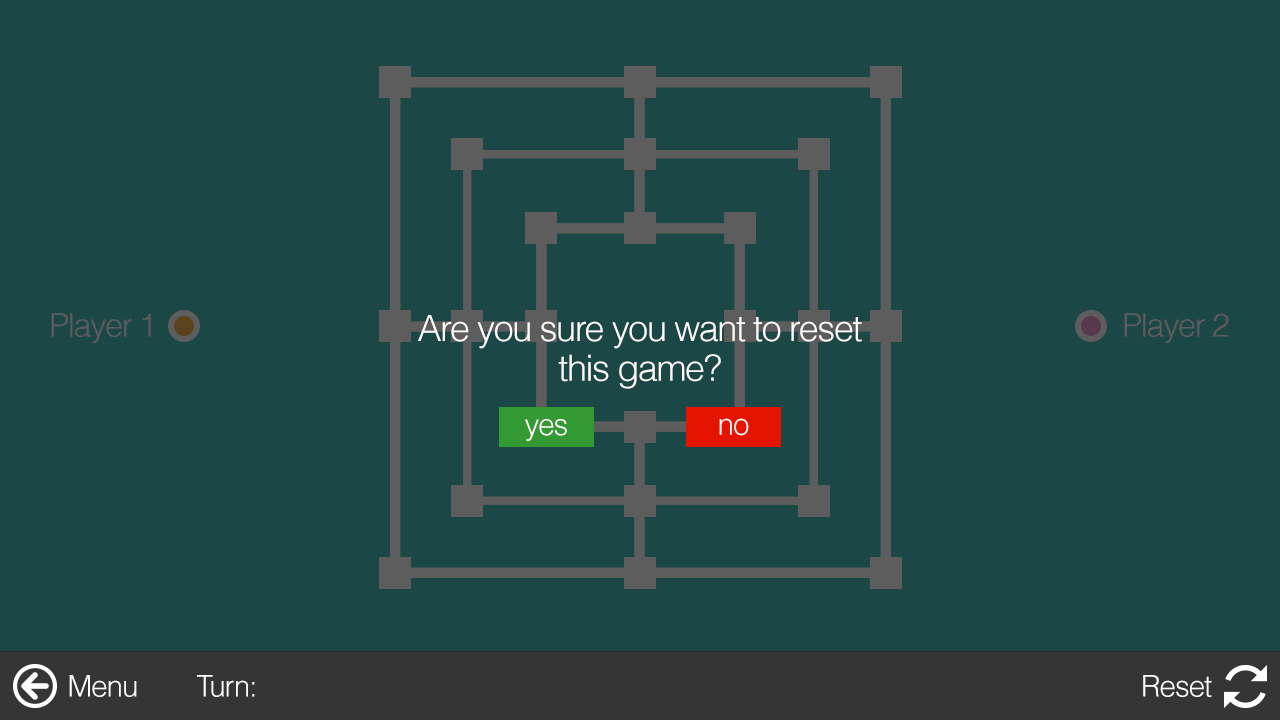
<style>
.page{position:relative;width:1280px;height:720px;background:#1b4847}
.page>*{position:absolute;margin:0}
.t1{font:32.1px "Helvetica-Light";letter-spacing:-0.04em;color:#5d5c5c}
.t2{font:36px/19.9px "Helvetica-Light";letter-spacing:-0.04em;color:#fffbfb}
.t3{font:30px "Helvetica-Light";letter-spacing:-0.04em;color:#fffbfb}
.t4{font:29.9px "Helvetica-Light";letter-spacing:-0.04em;color:#fffbfb}
.t5{font:29.7px "Helvetica-Light";letter-spacing:-0.04em;color:#fffbfb}
</style>
<div class="page">
<p class="t1" style="left:51px;top:313px;width:100px;height:30px">Player 1</p>
<p class="t2" style="left:418px;top:315px;width:444px;height:74px;text-align:center">Are you sure you want to reset <br><br>this game?</p>
<p class="t1" style="left:1124px;top:313px;width:105px;height:30px">Player 2</p>
<p class="t3" style="left:525px;top:419px;width:42px;height:22px">yes</p>
<p class="t4" style="left:719px;top:418px;width:30px;height:18px">no</p>
<p class="t5" style="left:69px;top:675px;width:68px;height:22px">Menu</p>
<p class="t5" style="left:197px;top:675px;width:58px;height:22px">Turn:</p>
<p class="t5" style="left:1143px;top:675px;width:69px;height:22px">Reset</p>
</div>
